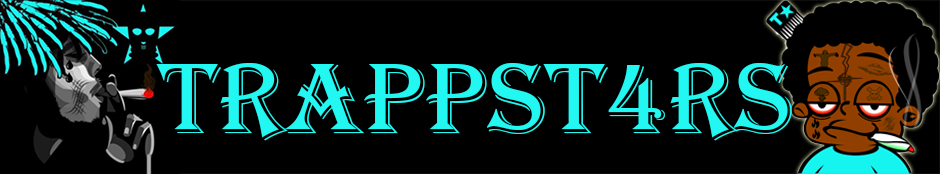
<style>
.page{position:relative;width:940px;height:174px;background:#000000}
.page>*{position:absolute;margin:0}
.t1{font:104.4px "Algerian";color:#23f7f1}
</style>
<div class="page">
<p class="t1" style="left:156px;top:63px;width:636px;height:78px">TRAPPST4RS</p>
</div>
